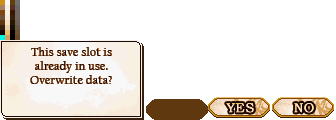
<style>
.page{position:relative;width:336px;height:120px;background:#ffffff}
.page>*{position:absolute;margin:0}
.t1{font:12px/14px "CalifornianFB-Reg";letter-spacing:0.025em;color:#180808}
</style>
<div class="page">
<p class="t1" style="left:30px;top:47px;width:82px;height:37px;text-align:center">This save slot is<br>already in use.<br>Overwrite data?</p>
</div>
